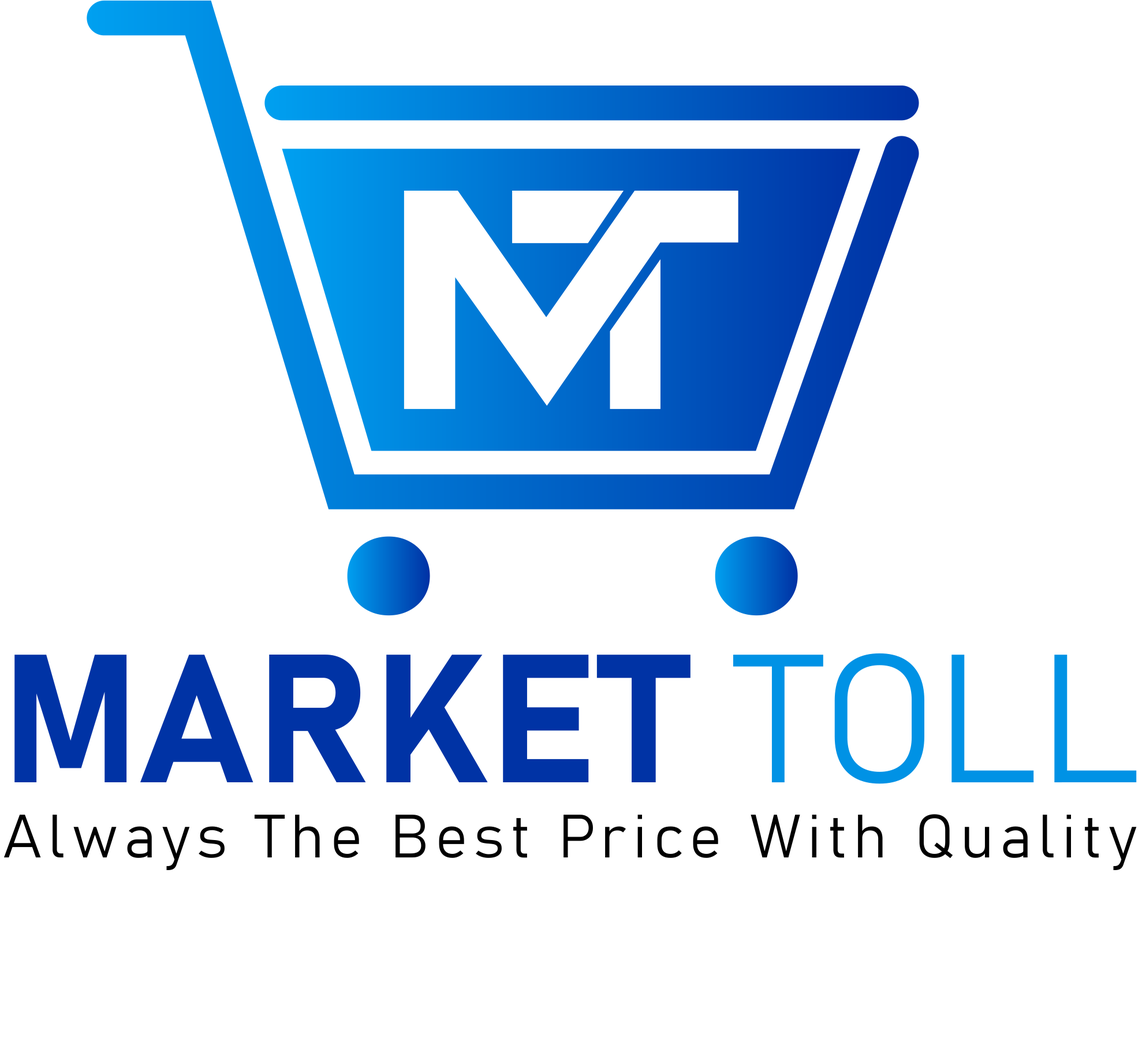
<style>
.page{position:relative;width:1142px;height:1044px;background:#ffffff}
.page>*{position:absolute;margin:0}
.t1{font:179.8px "Bahnschrift-Bold";color:#0033a5}
.t2{font:179.8px "Bahnschrift-Light";color:#0092e6}
.t3{font:60.2px "Bahnschrift-Light";letter-spacing:0.1em;color:#000000}
</style>
<div class="page">
<p class="t1" style="left:14px;top:653px;width:1123px;height:131px">MARKET <span class="t2">TOLL</span></p>
<p class="t3" style="left:4px;top:814px;width:1133px;height:56px">Always The Best Price With Quality</p>
</div>
